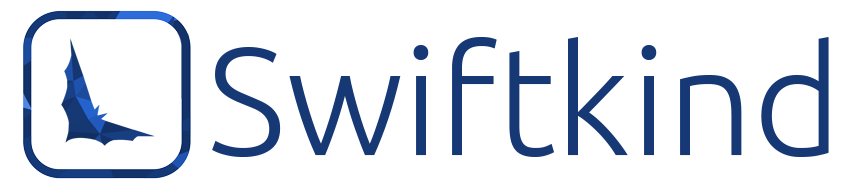
<style>
.page{position:relative;width:854px;height:194px;background:#ffffff}
.page>*{position:absolute;margin:0}
.t1{font:152px "Ubuntu-Light";color:#163875}
</style>
<div class="page">
<p class="t1" style="left:212px;top:37px;width:617px;height:120px">Swiftkind</p>
</div>
